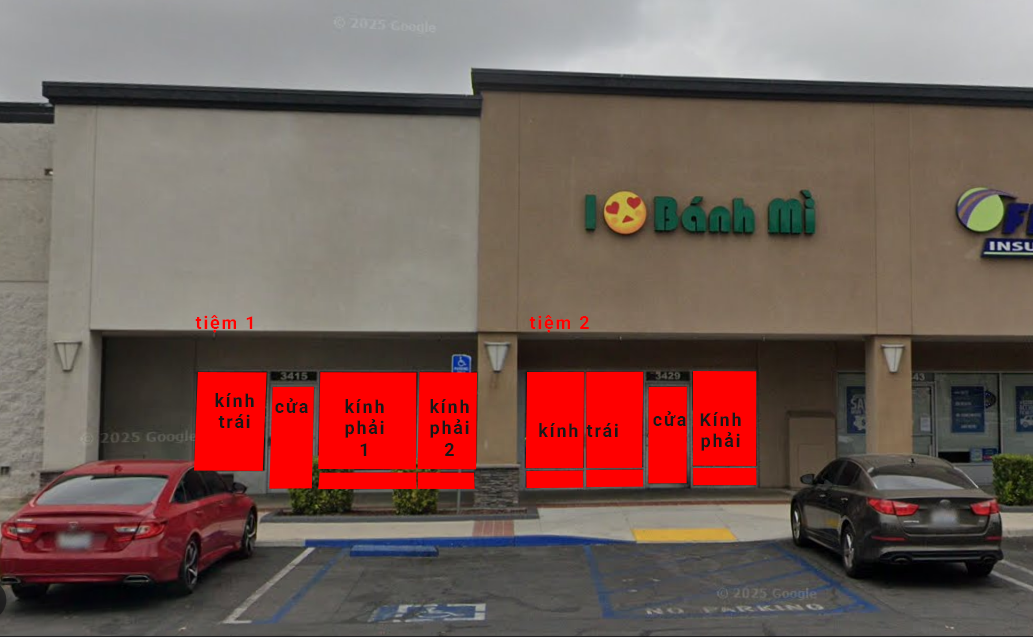
<style>
.page{position:relative;width:1033px;height:637px}
.page>*{position:absolute;margin:0}
.t1{font:18px "Roboto-Bold";letter-spacing:0.1em;color:#ff0000}
.t2{font:18px "Roboto-Bold";letter-spacing:0.1em;color:#181818}
</style>
<div class="page">
<p class="t1" style="left:195px;top:315px;width:58px;height:18px">tiệm 1</p>
<p class="t1" style="left:529px;top:315px;width:60px;height:18px">tiệm 2</p>
<p class="t2" style="left:215px;top:393px;width:39px;height:35px;text-align:center">kính <br>trái</p>
<p class="t2" style="left:275px;top:398px;width:33px;height:15px">cửa</p>
<p class="t2" style="left:345px;top:399px;width:39px;height:57px;text-align:center">kính <br>phải <br>1</p>
<p class="t2" style="left:430px;top:399px;width:39px;height:57px;text-align:center">kính <br>phải <br>2</p>
<p class="t2" style="left:653px;top:411px;width:33px;height:15px">cửa</p>
<p class="t2" style="left:700px;top:412px;width:41px;height:39px;text-align:center">Kính <br>phải</p>
<p class="t2" style="left:539px;top:423px;width:79px;height:14px">kính trái</p>
</div>
